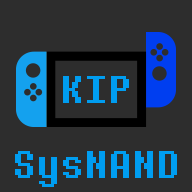
<style>
.page{position:relative;width:192px;height:192px;background:#2d2d2d}
.page>*{position:absolute;margin:0}
.t1{font:36px "BIG-SHOT";color:#009df0}
</style>
<div class="page">
<p class="t1" style="left:63px;top:76px;width:66px;height:27px">KIP</p>
<p class="t1" style="left:15px;top:151px;width:162px;height:36px">SysNAND</p>
</div>
